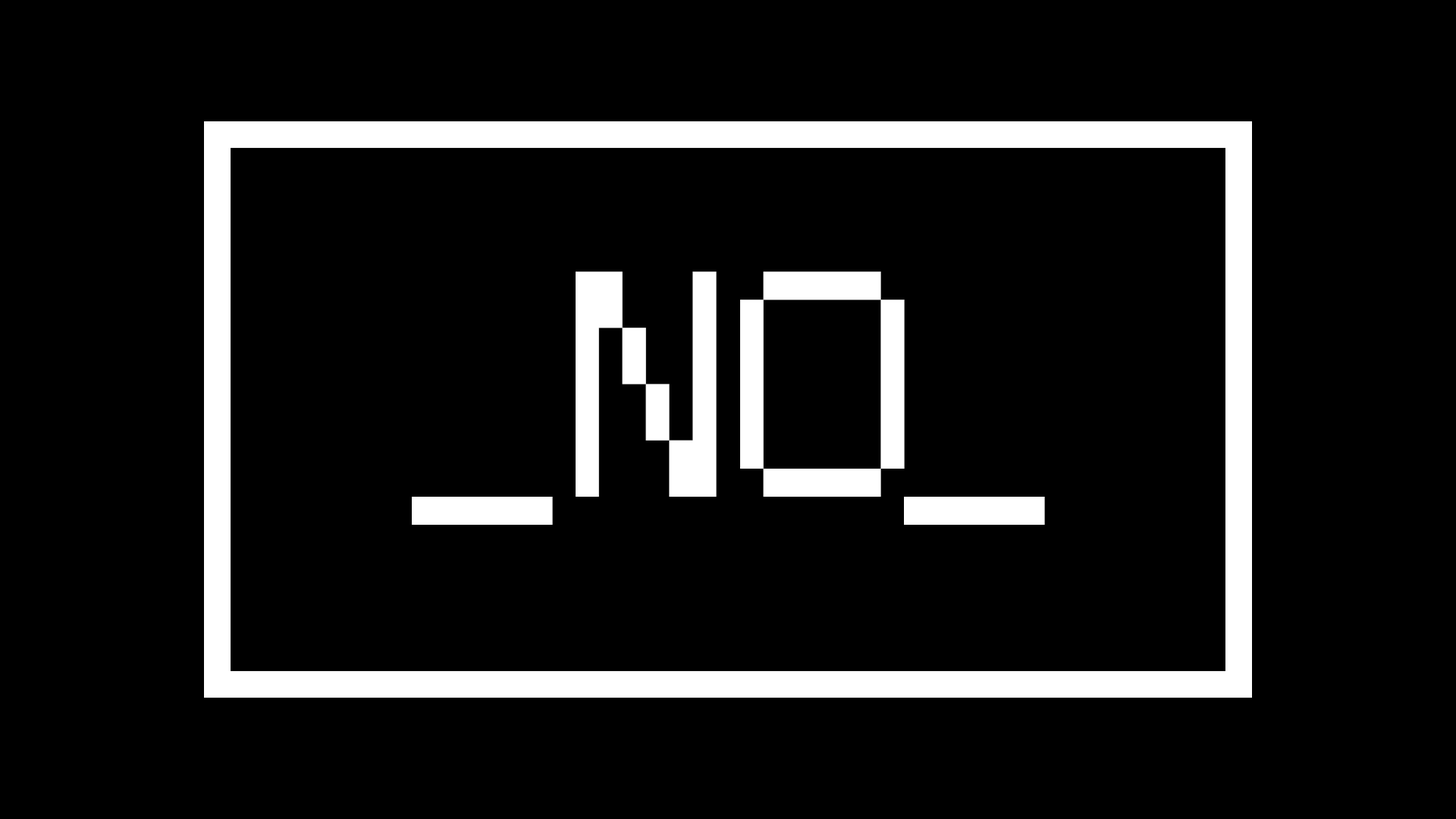
<style>
.page{position:relative;width:1456px;height:819px;background:#000000}
.page>*{position:absolute;margin:0}
.t1{font:300.2px "Small Fonts";color:#ffffff}
</style>
<div class="page">
<p class="t1" style="left:412px;top:271px;width:633px;height:254px">_NO_</p>
</div>
